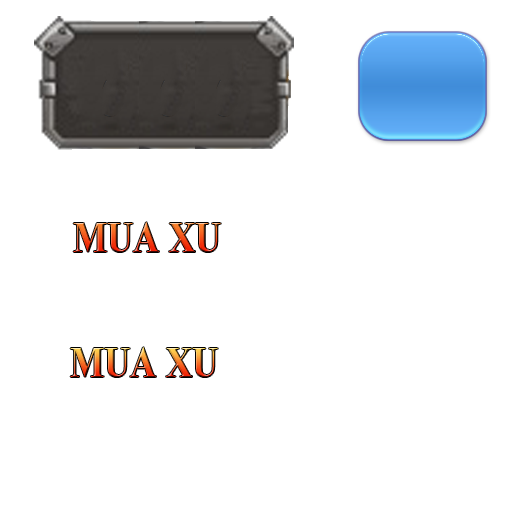
<style>
.page{position:relative;width:512px;height:512px;background:#ffffff}
.page>*{position:absolute;margin:0}
.t1{font:56.2px "Kokila-Bold";scale:0.83 1}
</style>
<div class="page">
<p class="t1" style="left:73px;top:222px;width:148px;height:30px">MUA XU</p>
<p class="t1" style="left:70px;top:347px;width:148px;height:30px">MUA XU</p>
</div>
